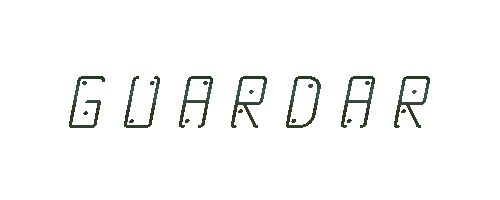
<style>
.page{position:relative;width:500px;height:200px;background:#ffffff}
.page>*{position:absolute;margin:0}
.t1{font:74.3px "SnakeGameDemoRegular";letter-spacing:0.28em;color:#32402a;font-style:italic;scale:1.1 1}
</style>
<div class="page">
<p class="t1" style="left:69px;top:76px;width:361px;height:52px">Guardar</p>
</div>
